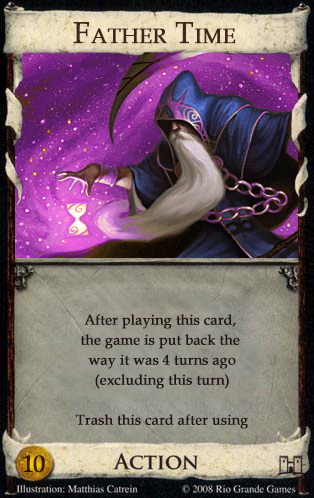
<style>
.page{position:relative;width:314px;height:498px}
.page>*{position:absolute;margin:0}
.t1{font:30px "BookAntiqua";color:#41251b;font-variant:small-caps;font-weight:bold}
.t2{font:14px/20px "BookAntiqua";color:#231512;font-weight:bold}
.t3{font:24px "BookAntiqua";color:#381902;font-weight:bold}
</style>
<div class="page">
<p class="t1" style="left:73px;top:22px;width:163px;height:22px">Father Time</p>
<p class="t2" style="left:76px;top:314px;width:173px;height:115px;text-align:center">After playing this card, <br>the game is put back the <br>way it was 4 turns ago<br>(excluding this turn)<br><br>Trash this card after using</p>
<p class="t3" style="left:22px;top:455px;width:23px;height:18px">10</p>
</div>
